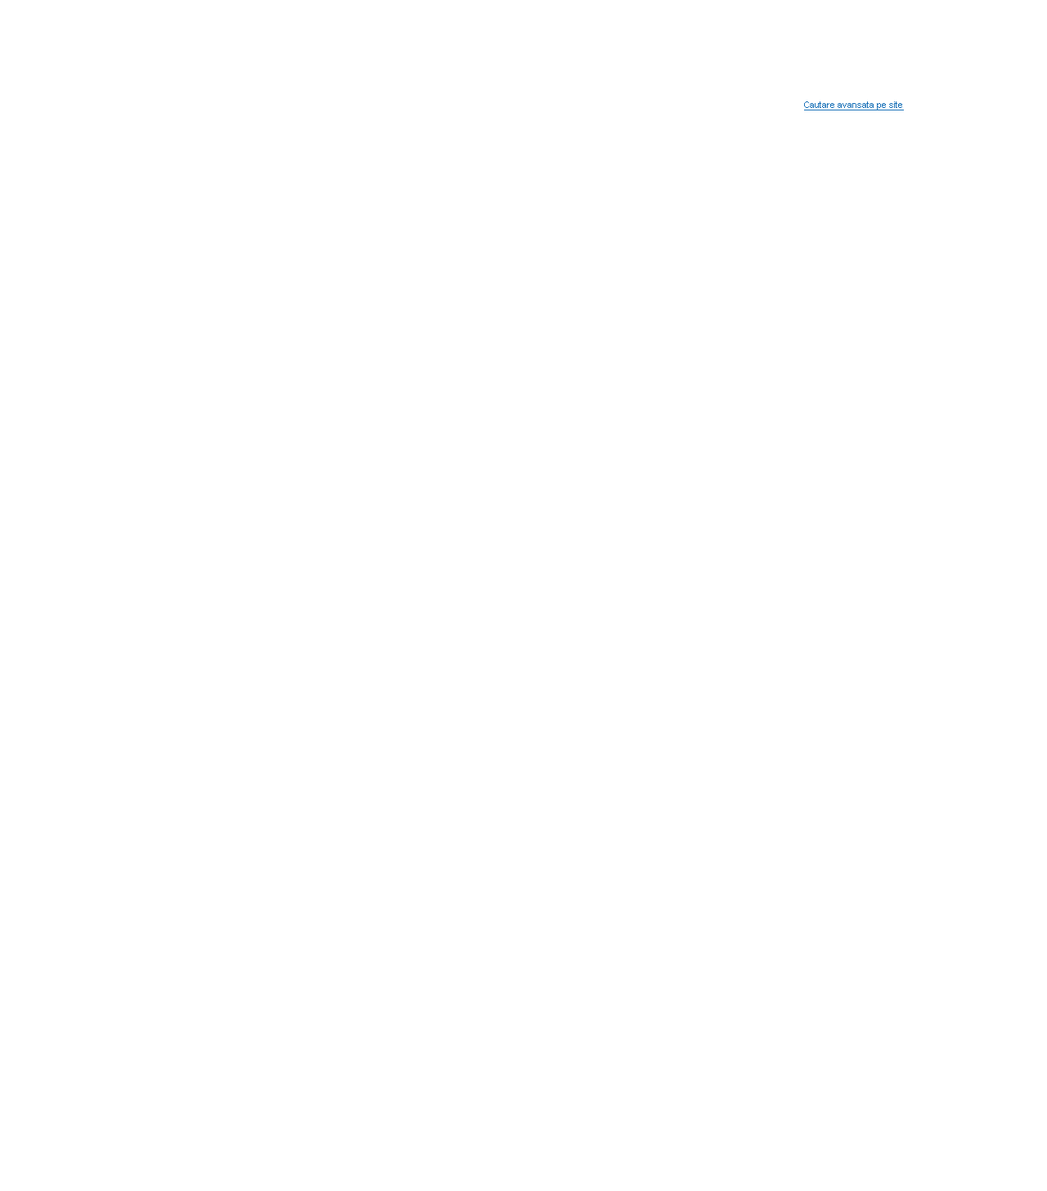
<style>
.page{position:relative;width:1047px;height:1191px;background:#ffffff}
.page>*{position:absolute;margin:0}
.t1{font:9px "ArialMT";color:#1971b8;text-decoration:underline}
</style>
<div class="page">
<p class="t1" style="left:804px;top:101px;width:100px;height:9px">Cautare avansata pe site</p>
</div>
